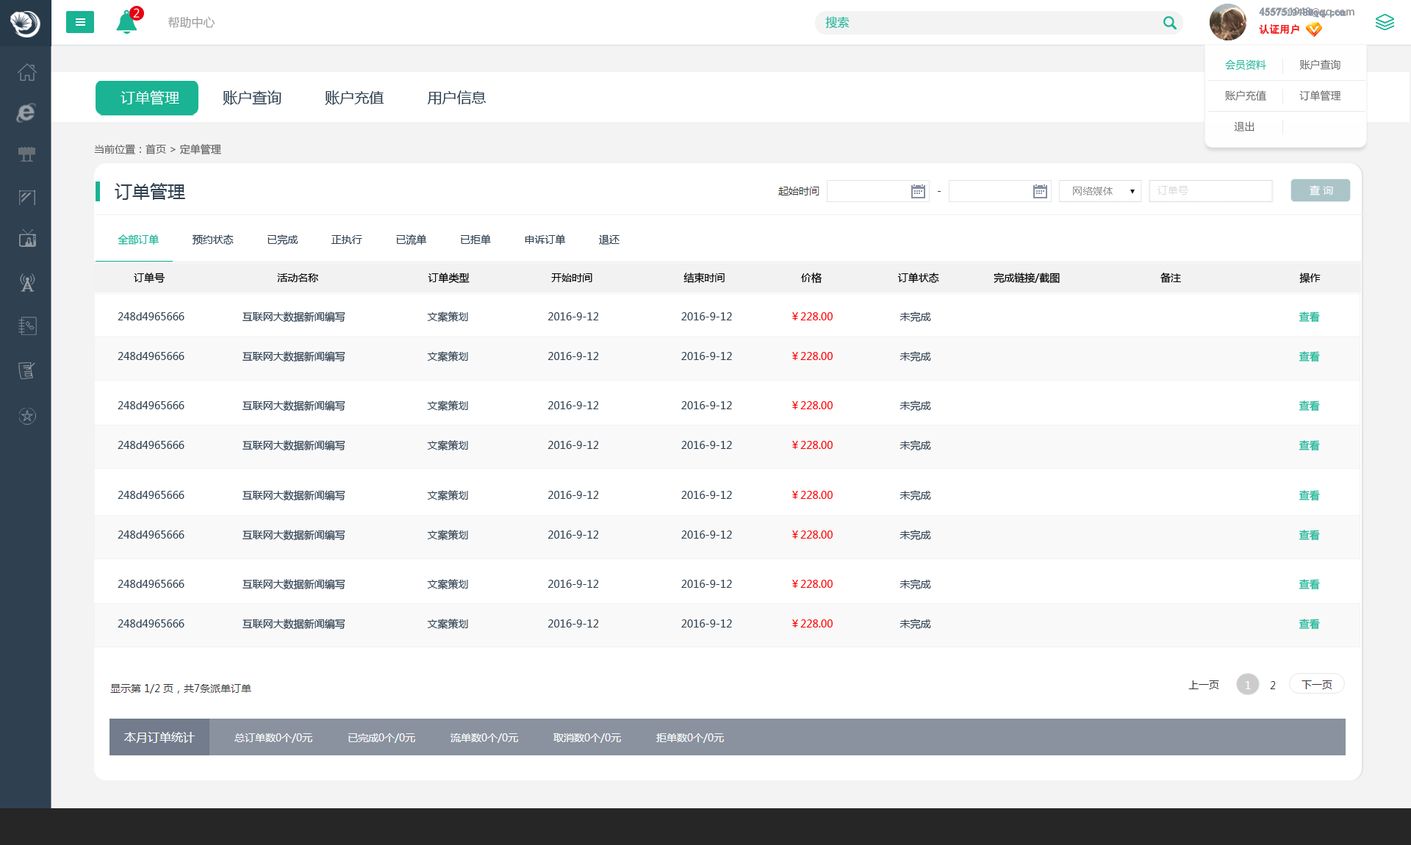
<style>
.page{position:relative;width:1411px;height:845px;background:#ffffff}
.page>*{position:absolute;margin:0}
.t1{font:11.8px "MicrosoftYaHei";color:#ffffff}
.t2{font:11.8px "MicrosoftYaHei";color:#999999}
.t3{font:11.8px "MicrosoftYaHei";color:#1ab394}
.t4{font:10.3px/17.6px "AdobeHeitiStd-Regular";color:#999999}
.t5{font:10.3px/17.6px "AdobeHeitiStd-Regular";color:#f61e1e}
.t6{font:10.3px/17.6px "AdobeHeitiStd-Regular";color:#ffffff}
.t7{font:10.3px/17.6px "SimSun";color:#8894a4;font-weight:bold}
.t8{font:10.3px/17.6px "SimSun";color:#f61e1e}
.t9{font:10.3px/30.9px "MicrosoftYaHei";color:#666666}
.t10{font:10.3px/30.9px "MicrosoftYaHei";color:#1ab394}
.t11{font:14.7px "MicrosoftYaHei";color:#2f4050}
.t12{font:14.7px "MicrosoftYaHei";color:#ffffff}
.t13{font:10.3px "MicrosoftYaHei";color:#666666}
.t14{font:17.6px "MicrosoftYaHei";color:#2f4050}
.t15{font:10.3px "MicrosoftYaHei";color:#dcd8d8}
.t16{font:10.3px "MicrosoftYaHei";color:#ffffff}
.t17{font:10.3px "MicrosoftYaHei";color:#999999}
.t18{font:10.3px "MicrosoftYaHei";color:#2f4050}
.t19{font:10.3px "MicrosoftYaHei";color:#1ab394}
.t20{font:10.3px "MicrosoftYaHei";color:#000000}
.t21{font:10.3px "MicrosoftYaHei";color:#ff0000}
</style>
<div class="page">
<p class="t1" style="left:133px;top:8px;width:7px;height:10px">2</p>
<p class="t2" style="left:168px;top:16px;width:47px;height:13px">帮助中心</p>
<p class="t3" style="left:825px;top:16px;width:25px;height:13px">搜索</p>
<p class="t4" style="left:1259px;top:7px;width:95px;height:28px">455751948@qq.com<br><span class="t5">认证用户               </span><span class="t6">退出</span></p>
<p class="t7" style="left:1259px;top:8px;width:87px;height:27px">455751948@qq.com<br><span class="t8">认证用户</span></p>
<p class="t9" style="left:1225px;top:60px;width:116px;height:72px"><span class="t10">会员资料</span>           账户查询<br>账户充值           订单管理           <br>   退出</p>
<p class="t11" style="left:121px;top:90px;width:365px;height:15px"><span class="t12">订单管理          </span>账户查询          账户充值          用户信息</p>
<p class="t13" style="left:94px;top:144px;width:127px;height:11px">当前位置：首页 &gt; 定单管理</p>
<p class="t14" style="left:115px;top:183px;width:70px;height:17px">订单管理</p>
<p class="t15" style="left:1157px;top:186px;width:31px;height:9px">订单号</p>
<p class="t16" style="left:1310px;top:185px;width:23px;height:10px">查 询</p>
<p class="t17" style="left:1073px;top:187px;width:40px;height:8px">网络媒体</p>
<p class="t18" style="left:118px;top:234px;width:502px;height:11px"><span class="t19">全部订单</span>           预约状态           已完成           正执行           已流单           已拒单           申诉订单           退还</p>
<p class="t20" style="left:134px;top:273px;width:1187px;height:11px">订单号                                     活动名称                                    订单类型                           开始时间                              结束时间                         价格                         订单状态                  完成链接/截图                                 备注                                       操作</p>
<p class="t18" style="left:118px;top:312px;width:1202px;height:11px">248d4965666                   互联网大数据新闻编写                           文案策划                          2016-9-12                           2016-9-12                   <span class="t21">￥228.00                 </span>     未完成                                                                                                                         <span class="t19">查看</span></p>
<p class="t18" style="left:118px;top:351px;width:1202px;height:11px">248d4965666                   互联网大数据新闻编写                           文案策划                          2016-9-12                           2016-9-12                   <span class="t21">￥228.00                 </span>     未完成                                                                                                                         <span class="t19">查看</span></p>
<p class="t18" style="left:118px;top:401px;width:1202px;height:11px">248d4965666                   互联网大数据新闻编写                           文案策划                          2016-9-12                           2016-9-12                   <span class="t21">￥228.00                 </span>     未完成                                                                                                                         <span class="t19">查看</span></p>
<p class="t18" style="left:118px;top:440px;width:1202px;height:11px">248d4965666                   互联网大数据新闻编写                           文案策划                          2016-9-12                           2016-9-12                   <span class="t21">￥228.00                 </span>     未完成                                                                                                                         <span class="t19">查看</span></p>
<p class="t18" style="left:118px;top:490px;width:1202px;height:11px">248d4965666                   互联网大数据新闻编写                           文案策划                          2016-9-12                           2016-9-12                   <span class="t21">￥228.00                 </span>     未完成                                                                                                                         <span class="t19">查看</span></p>
<p class="t18" style="left:118px;top:530px;width:1202px;height:11px">248d4965666                   互联网大数据新闻编写                           文案策划                          2016-9-12                           2016-9-12                   <span class="t21">￥228.00                 </span>     未完成                                                                                                                         <span class="t19">查看</span></p>
<p class="t18" style="left:118px;top:579px;width:1202px;height:11px">248d4965666                   互联网大数据新闻编写                           文案策划                          2016-9-12                           2016-9-12                   <span class="t21">￥228.00                 </span>     未完成                                                                                                                         <span class="t19">查看</span></p>
<p class="t18" style="left:118px;top:619px;width:1202px;height:11px">248d4965666                   互联网大数据新闻编写                           文案策划                          2016-9-12                           2016-9-12                   <span class="t21">￥228.00                 </span>     未完成                                                                                                                         <span class="t19">查看</span></p>
</div>
